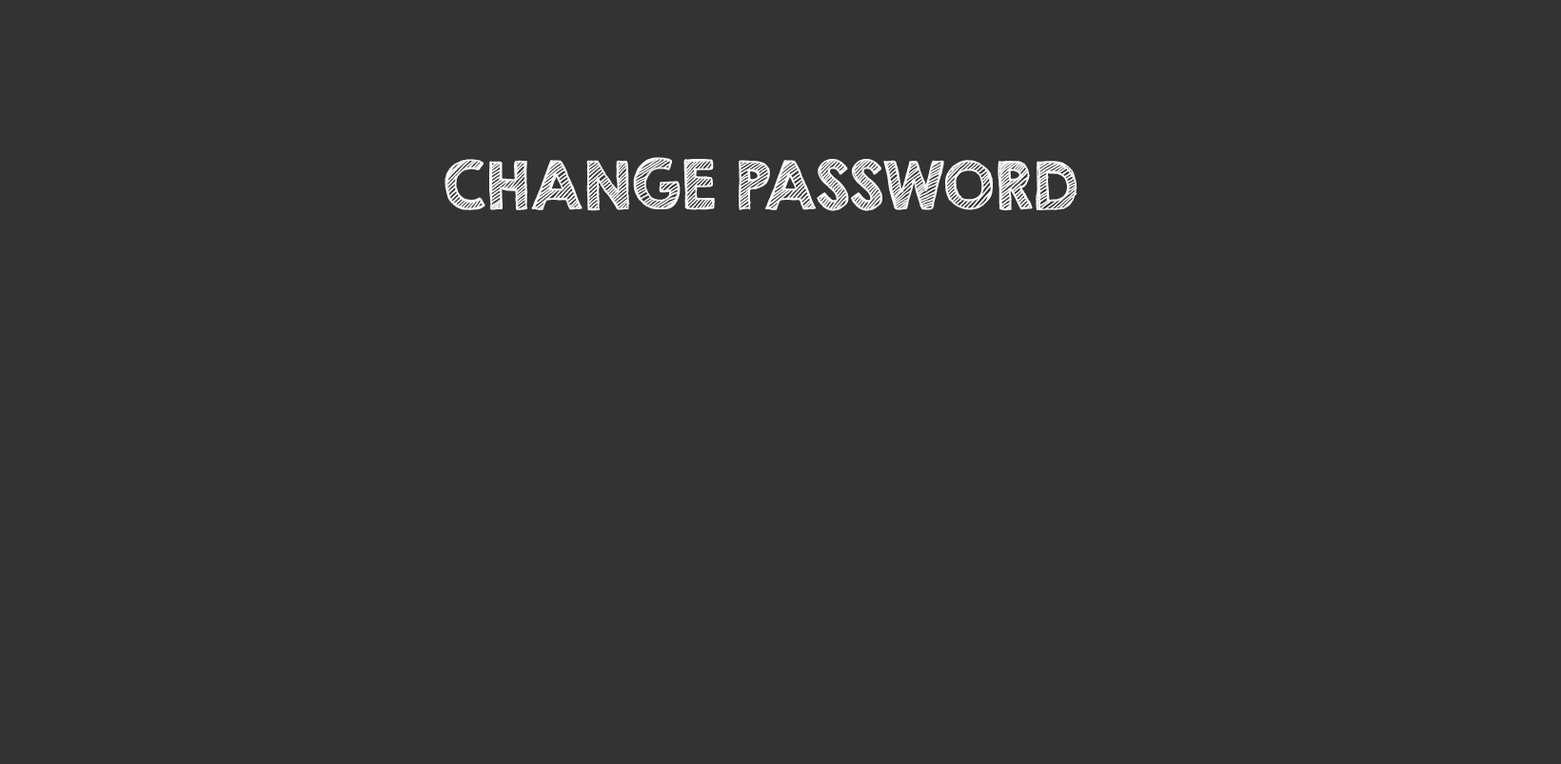
<style>
.page{position:relative;width:1561px;height:764px;background:#333333}
.page>*{position:absolute;margin:0}
.t1{font:59.6px "KGSecondChancesSketch";color:#fbfafb;font-weight:bold}
</style>
<div class="page">
<p class="t1" style="left:444px;top:157px;width:633px;height:54px">CHANGE PASSWORD</p>
</div>
